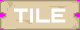
<style>
.page{position:relative;width:80px;height:30px;background:#e1cea8}
.page>*{position:absolute;margin:0}
.t1{font:18px "Pixel";color:#ffffff}
</style>
<div class="page">
<p class="t1" style="left:14px;top:8px;width:52px;height:15px">TILE</p>
</div>
